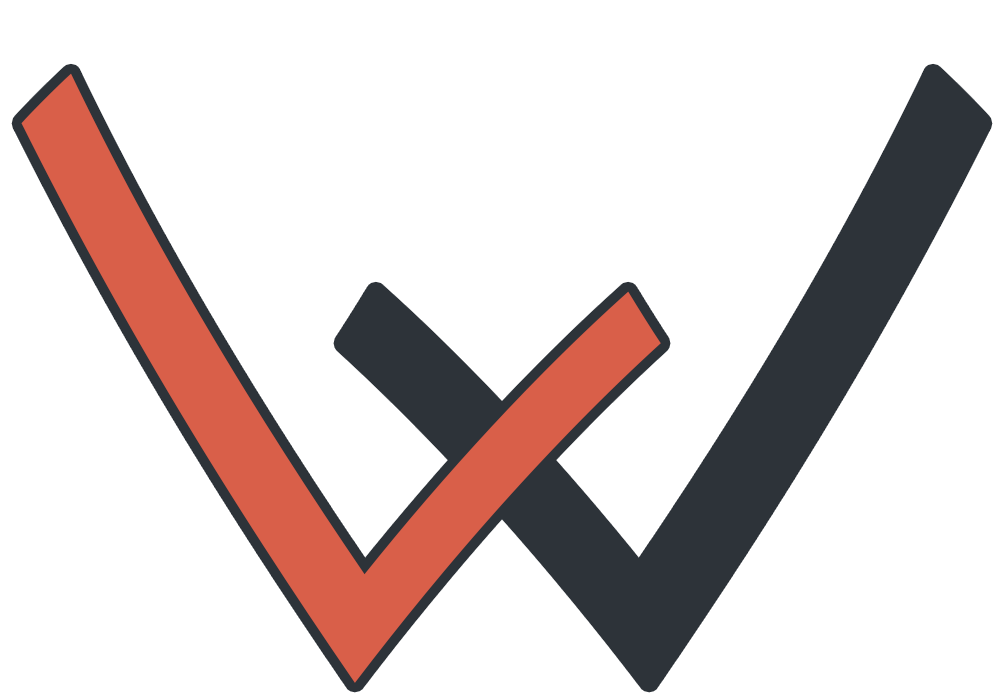
<style>
.page{position:relative;width:1000px;height:700px;background:#ffffff}
.page>*{position:absolute;margin:0}
.t1{font:871.8px "YuppyTC-Regular";color:#d95f49;font-style:italic;scale:1.1 1}
.t2{font:871.8px "YuppyTC-Regular";color:#2d3339;font-style:italic;scale:1.1 1}
</style>
<div class="page">
<p class="t1" style="left:21px;top:73px;width:640px;height:610px;rotate:-45deg">L</p>
<p class="t1" style="left:21px;top:73px;width:640px;height:610px;rotate:-45deg">L</p>
<p class="t2" style="left:343px;top:73px;width:640px;height:610px;rotate:-135deg">L</p>
<p class="t2" style="left:343px;top:73px;width:640px;height:610px;rotate:-135deg">L</p>
</div>
